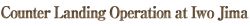
<style>
.page{position:relative;width:250px;height:26px;background:#ffffff}
.page>*{position:absolute;margin:0}
.t1{font:16px "RyuminPro-ExBold";letter-spacing:-0.08em;color:#6c573f;font-weight:bold;scale:0.9 1}
</style>
<div class="page">
<p class="t1" style="left:1px;top:6px;width:248px;height:15px">Counter Landing Operation at Iwo Jima</p>
</div>
